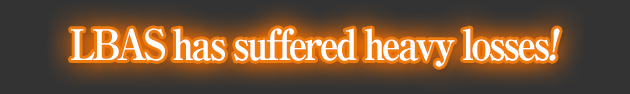
<style>
.page{position:relative;width:630px;height:94px;background:#333333}
.page>*{position:absolute;margin:0}
.t1{font:42px "RyuminPro-ExBold";letter-spacing:-0.08em;color:#ffffff;scale:0.9 1}
.t2{font:42px "RyuminPro-ExBold";letter-spacing:-0.08em;color:#ffffff;font-style:italic;scale:0.9 1}
</style>
<div class="page">
<p class="t1" style="left:71px;top:28px;width:489px;height:39px">LBAS has suffered heavy losses<span class="t2">!</span></p>
</div>
